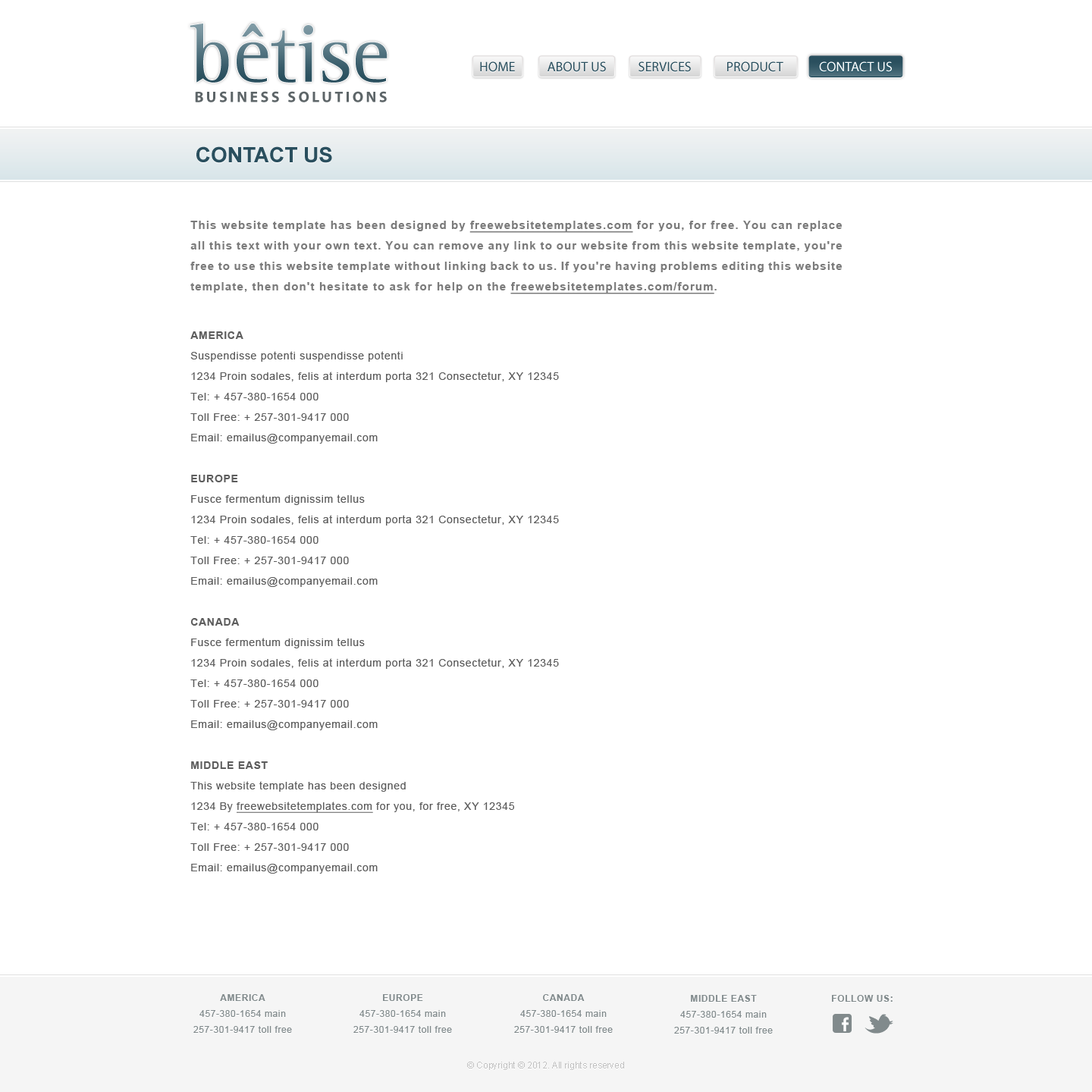
<style>
.page{position:relative;width:1092px;height:1092px;background:#ffffff}
.page>*{position:absolute;margin:0}
.t1{font:83.4px "LeftistMonoSerif"}
.t2{font:13.6px "MyriadPro-Regular";color:#2a4f5e}
.t3{font:13.6px "MyriadPro-Regular";color:#ffffff}
.t4{font:15.2px "MyriadPro-Bold";letter-spacing:0.17em;color:#5d6568;text-transform:uppercase}
.t5{font:21.2px "Arial-BoldMT";color:#2a4f5e;text-transform:uppercase}
.t6{font:11.4px/20.5px "Arial-BoldMT";letter-spacing:0.075em;color:#7b7b7b}
.t7{font:11.4px/20.5px "Arial-BoldMT";letter-spacing:0.075em;color:#7b7b7b;text-decoration:underline}
.t8{font:10.6px/20.5px "Arial-BoldMT";letter-spacing:0.05em;color:#5d5d5d}
.t9{font:10.6px/20.5px "ArialMT";letter-spacing:0.05em;color:#5d5d5d}
.t10{font:10.6px/20.5px "ArialMT";letter-spacing:0.05em;color:#5d5d5d;text-decoration:underline}
.t11{font:9.1px/15.9px "ArialMT";letter-spacing:0.05em;color:#818a8c}
.t12{font:9.1px/15.9px "Arial-BoldMT";letter-spacing:0.05em;color:#818a8c;text-transform:uppercase}
.t13{font:9.1px "Arial-BoldMT";letter-spacing:0.05em;color:#818a8c;text-transform:uppercase}
.t14{font:9.1px "ArialMT";color:#c1c1c1}
</style>
<div class="page">
<p class="t1" style="left:190px;top:24px;width:198px;height:59px">bêtise</p>
<p class="t2" style="left:480px;top:61px;width:303px;height:11px">HOME           ABOUT US           SERVICES            PRODUCT</p>
<p class="t3" style="left:819px;top:61px;width:73px;height:11px">CONTACT US</p>
<p class="t4" style="left:195px;top:91px;width:192px;height:11px">Business Solutions</p>
<p class="t5" style="left:196px;top:146px;width:136px;height:17px">Contact us</p>
<p class="t6" style="left:190px;top:221px;width:652px;height:653px;text-align:justify">This website template has been designed by <span class="t7">freewebsitetemplates.com</span> for you, for free. You can replace all this text with your own text. You can remove any link to our website from this website template, you're free to use this website template without linking back to us. If you're having problems editing this website template, then don't hesitate to ask for help on the <span class="t7">freewebsitetemplates.com/forum</span>.<br><br><span class="t8">AMERICA<br></span><span class="t9">Suspendisse potenti suspendisse potenti<br>1234 Proin sodales, felis at interdum porta 321 Consectetur, XY 12345<br>Tel: + 457-380-1654 000<br>Toll Free: + 257-301-9417 000<br>Email: emailus@companyemail.com<br><br></span><span class="t8">EUROPE<br></span><span class="t9">Fusce fermentum dignissim tellus<br>1234 Proin sodales, felis at interdum porta 321 Consectetur, XY 12345<br>Tel: + 457-380-1654 000<br>Toll Free: + 257-301-9417 000<br>Email: emailus@companyemail.com<br><br></span><span class="t8">CANADA<br></span><span class="t9">Fusce fermentum dignissim tellus<br>1234 Proin sodales, felis at interdum porta 321 Consectetur, XY 12345<br>Tel: + 457-380-1654 000<br>Toll Free: + 257-301-9417 000<br>Email: emailus@companyemail.com<br><br></span><span class="t8">MIDDLE EAST<br></span><span class="t9">This website template has been designed<br>1234 By </span><span class="t10">freewebsitetemplates.com</span><span class="t9"> for you, for free, XY 12345<br>Tel: + 457-380-1654 000<br>Toll Free: + 257-301-9417 000<br>Email: emailus@companyemail.com</span></p>
<p class="t11" style="left:193px;top:994px;width:99px;height:39px;text-align:center"><span class="t12">America<br></span>457-380-1654 main<br>257-301-9417 toll free</p>
<p class="t11" style="left:353px;top:994px;width:99px;height:39px;text-align:center"><span class="t12">Europe<br></span>457-380-1654 main<br>257-301-9417 toll free</p>
<p class="t11" style="left:514px;top:994px;width:99px;height:39px;text-align:center"><span class="t12">Canada<br></span>457-380-1654 main<br>257-301-9417 toll free</p>
<p class="t11" style="left:674px;top:995px;width:99px;height:39px;text-align:center"><span class="t12">Middle East<br></span>457-380-1654 main<br>257-301-9417 toll free</p>
<p class="t13" style="left:832px;top:995px;width:61px;height:7px">Follow us:</p>
<p class="t14" style="left:467px;top:1062px;width:157px;height:8px">© Copyright © 2012. All rights reserved</p>
</div>
